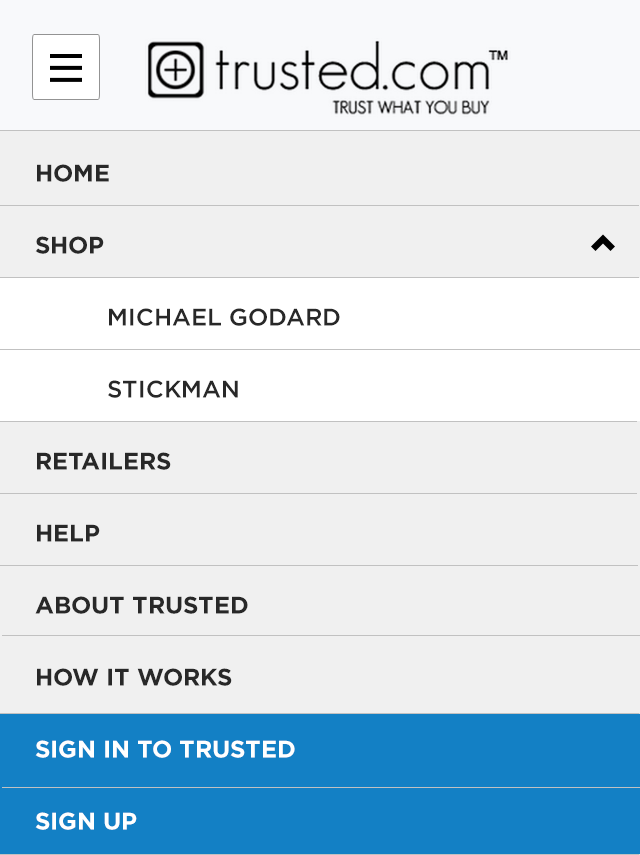
<style>
.page{position:relative;width:640px;height:855px;background:#f0f0f0}
.page>*{position:absolute;margin:0}
.t1{font:24px/72px "GothamHTF-Bold";color:#282828;text-transform:uppercase}
.t2{font:24px/72px "GothamHTF-Medium";color:#282828;text-transform:uppercase}
.t3{font:24px/72px "GothamHTF-Bold";color:#ffffff;text-transform:uppercase}
</style>
<div class="page">
<p class="t1" style="left:35px;top:164px;width:305px;height:666px">home<br>shop<br>  <span class="t2">michael godard<br>  stickman<br></span>retailers<br>help<br>about trusted<br>how it works<br><span class="t3">sign in to trusted<br>sign up</span></p>
</div>
